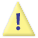
<style>
.page{position:relative;width:38px;height:38px;background:#ffffff}
.page>*{position:absolute;margin:0}
.t1{font:24px "MetaBold";color:#3d40a3}
</style>
<div class="page">
<p class="t1" style="left:16px;top:13px;width:5px;height:18px">!</p>
</div>
